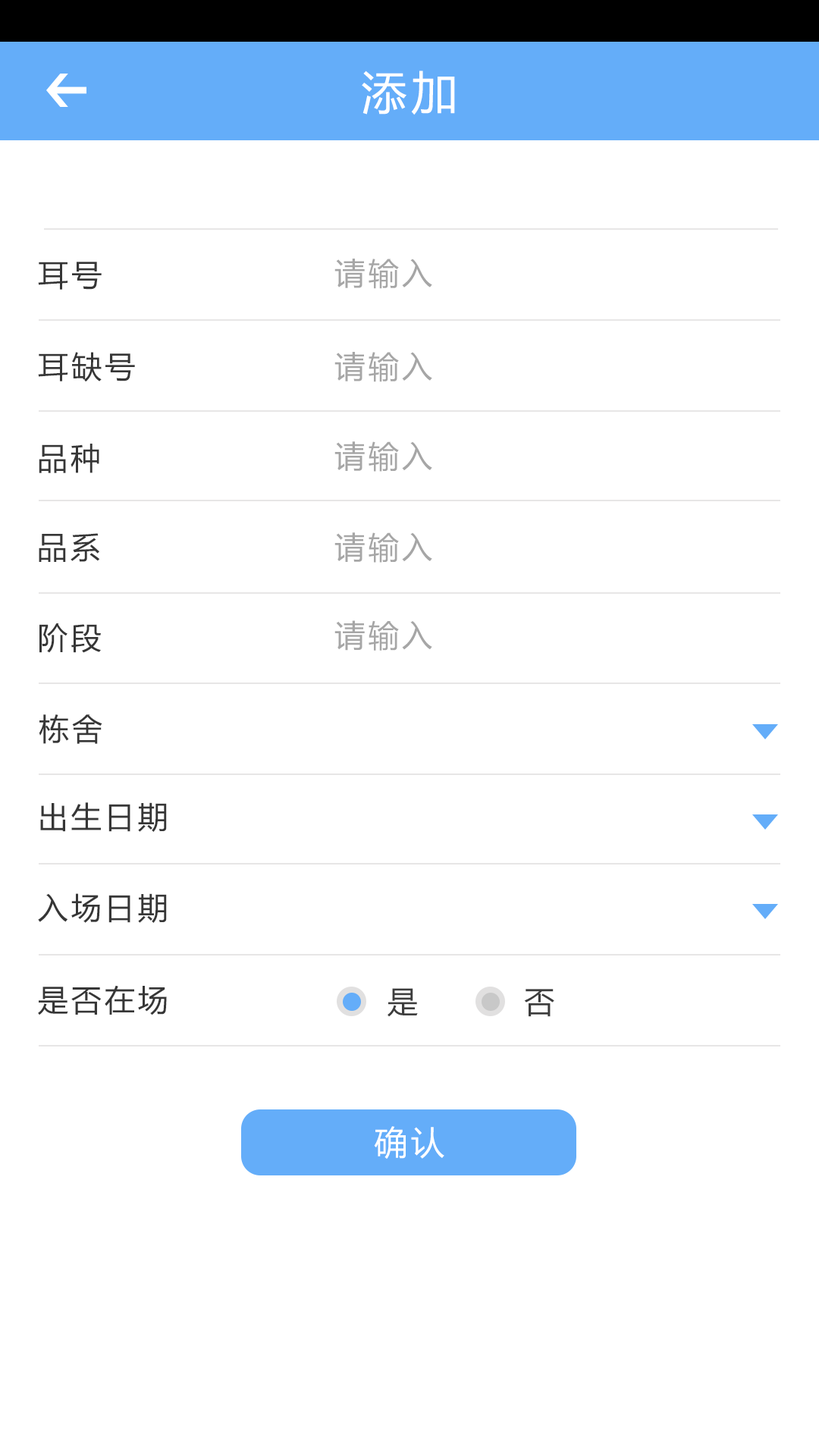
<style>
.page{position:relative;width:819px;height:1456px;background:#ffffff}
.page>*{position:absolute;margin:0}
.t1{font:45.5px "MicrosoftYaHei";letter-spacing:0.1em;color:#ffffff}
.t2{font:30.3px "MicrosoftYaHei";letter-spacing:0.1em;color:#363636}
.t3{font:30.7px "MicrosoftYaHei";letter-spacing:0.1em;color:#a6a6a6}
.t4{font:30.3px "MicrosoftYaHei";letter-spacing:0.1em;color:#3d3d3d}
.t5{font:33.4px "MicrosoftYaHei";letter-spacing:0.1em;color:#ffffff}
</style>
<div class="page">
<p class="t1" style="left:362px;top:71px;width:93px;height:44px">添加</p>
<p class="t2" style="left:38px;top:262px;width:64px;height:28px">耳号</p>
<p class="t3" style="left:334px;top:259px;width:98px;height:30px">请输入</p>
<p class="t2" style="left:38px;top:352px;width:97px;height:30px">耳缺号</p>
<p class="t3" style="left:334px;top:352px;width:98px;height:30px">请输入</p>
<p class="t2" style="left:39px;top:444px;width:60px;height:29px">品种</p>
<p class="t3" style="left:334px;top:441px;width:98px;height:31px">请输入</p>
<p class="t2" style="left:39px;top:533px;width:61px;height:29px">品系</p>
<p class="t3" style="left:334px;top:532px;width:98px;height:31px">请输入</p>
<p class="t2" style="left:39px;top:623px;width:62px;height:30px">阶段</p>
<p class="t3" style="left:334px;top:620px;width:98px;height:31px">请输入</p>
<p class="t2" style="left:39px;top:714px;width:63px;height:30px">栋舍</p>
<p class="t2" style="left:40px;top:802px;width:127px;height:30px">出生日期</p>
<p class="t2" style="left:38px;top:893px;width:129px;height:30px">入场日期</p>
<p class="t2" style="left:38px;top:985px;width:129px;height:30px">是否在场</p>
<p class="t4" style="left:388px;top:988px;width:30px;height:29px">是</p>
<p class="t4" style="left:524px;top:989px;width:30px;height:28px">否</p>
<p class="t5" style="left:374px;top:1126px;width:70px;height:33px">确认</p>
</div>
